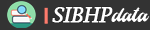
<style>
.page{position:relative;width:150px;height:30px;background:#333333}
.page>*{position:absolute;margin:0}
.t1{font:20px "LucidaBright-Italic";color:#ffffff;font-weight:bold}
.t2{font:20px "HistoriaScriptDEMO";color:#ffffff}
</style>
<div class="page">
<p class="t1" style="left:52px;top:7px;width:61px;height:16px">SIBHP</p>
<p class="t2" style="left:111px;top:7px;width:39px;height:15px">data</p>
</div>
